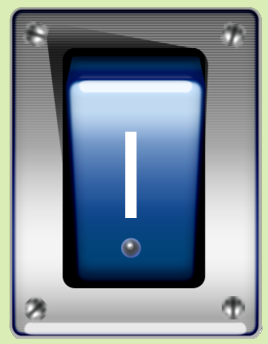
<style>
.page{position:relative;width:268px;height:344px}
.page>*{position:absolute;margin:0}
.t1{font:120px "MS Dialog Light";color:#ffffff}
</style>
<div class="page">
<p class="t1" style="left:125px;top:131px;width:12px;height:87px">I</p>
</div>
